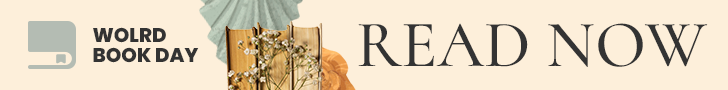
<style>
.page{position:relative;width:728px;height:90px;background:#fdefda}
.page>*{position:absolute;margin:0}
.t1{font:19.8px/20.1px "Poppins-ExtraBold";color:#333333}
.t2{font:66.7px "CormorantUnicase-Medium";color:#333333}
</style>
<div class="page">
<p class="t1" style="left:93px;top:27px;width:106px;height:36px">WOLRD<br>BOOK DAY</p>
<p class="t2" style="left:358px;top:23px;width:350px;height:44px">READ NOW</p>
</div>
